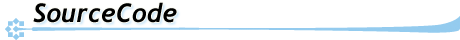
<style>
.page{position:relative;width:460px;height:40px;background:#ffffff}
.page>*{position:absolute;margin:0}
.t1{font:26px "Trebuchet-BoldItalic";letter-spacing:0.01em;color:#000000}
</style>
<div class="page">
<p class="t1" style="left:33px;top:2px;width:144px;height:21px">SourceCode</p>
</div>
